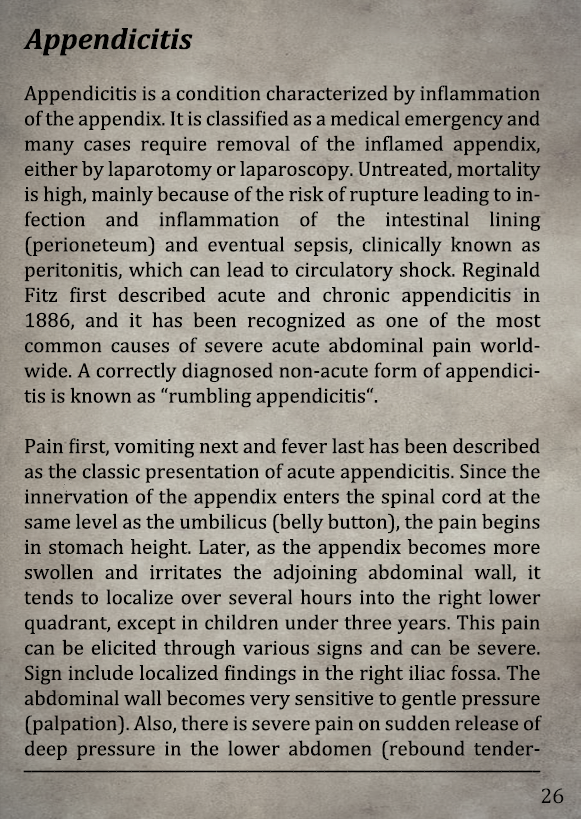
<style>
.page{position:relative;width:581px;height:819px}
.page>*{position:absolute;margin:0}
.t1{font:30px "Cambria-BoldItalic";color:#000000}
.t2{font:21px "Cambria";color:#000000}
.t3{font:21px "Arimo";color:#000000;scale:0.66 1}
.t4{font:21.5px "Cambria";color:#000000}
</style>
<div class="page">
<p class="t1" style="left:23px;top:28px;width:170px;height:28px">Appendicitis</p>
<p class="t2" style="left:24px;top:85px;width:518px;height:675px;text-align:justify">Appendicitis is a condition characterized by inflammation of the appendix. It is classified as a medical emergency and many cases require removal of the inflamed appendix, either by laparotomy or laparoscopy. Untreated, mortality is high, mainly because of the risk of rupture leading to infection and inflammation of the intestinal lining                (perioneteum) and eventual sepsis, clinically known as peritonitis, which can lead to circulatory shock. Reginald Fitz first described acute and chronic appendicitis in 1886, and it has been recognized as one of the most common causes of severe acute abdominal pain world-<br>wide. A correctly diagnosed non-acute form of appendicitis is known as “rumbling appendicitis“.<br><br>Pain first, vomiting next and fever last has been described as the classic presentation of acute appendicitis. Since the innervation of the appendix enters the spinal cord at the same level as the umbilicus (belly button), the pain begins in stomach height. Later, as the appendix becomes more swollen and irritates the adjoining abdominal wall, it tends to localize over several hours into the right lower quadrant, except in children under three years. This pain can be elicited through various signs and can be severe. Sign include localized findings in the right iliac fossa. The abdominal wall becomes very sensitive to gentle pressure (palpation). Also, there is severe pain on sudden release of deep pressure in the lower abdomen (rebound tender-</p>
<p class="t3" style="left:23px;top:770px;width:518px;height:3px">___________________________________________________________________</p>
<p class="t4" style="left:541px;top:788px;width:23px;height:16px">26</p>
</div>
